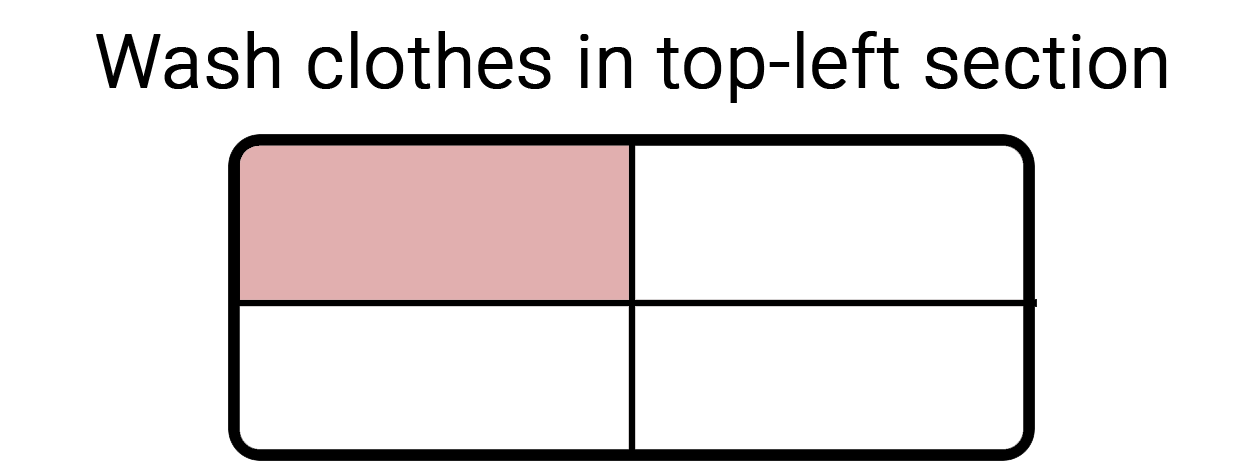
<style>
.page{position:relative;width:1260px;height:461px;background:#ffffff}
.page>*{position:absolute;margin:0}
.t1{font:74px "Roboto-Light";color:#000000;font-weight:bold}
</style>
<div class="page">
<p class="t1" style="left:96px;top:31px;width:1071px;height:72px">Wash clothes in top-left section</p>
</div>
